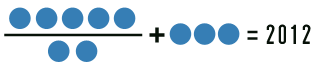
<style>
.page{position:relative;width:317px;height:69px;background:#ffffff}
.page>*{position:absolute;margin:0}
.t1{font:33.3px "HGGothicE";color:#071108}
.t2{font:24px "HGGothicE";color:#071108}
.t3{font:20.3px "HGGothicE";color:#071108;scale:15.83 1}
</style>
<div class="page">
<p class="t1" style="left:149px;top:27px;width:16px;height:16px">+</p>
<p class="t2" style="left:247px;top:30px;width:11px;height:10px">=</p>
<p class="t2" style="left:266px;top:24px;width:45px;height:20px">2012</p>
<p class="t3" style="left:4px;top:33px;width:139px;height:4px">-</p>
</div>
